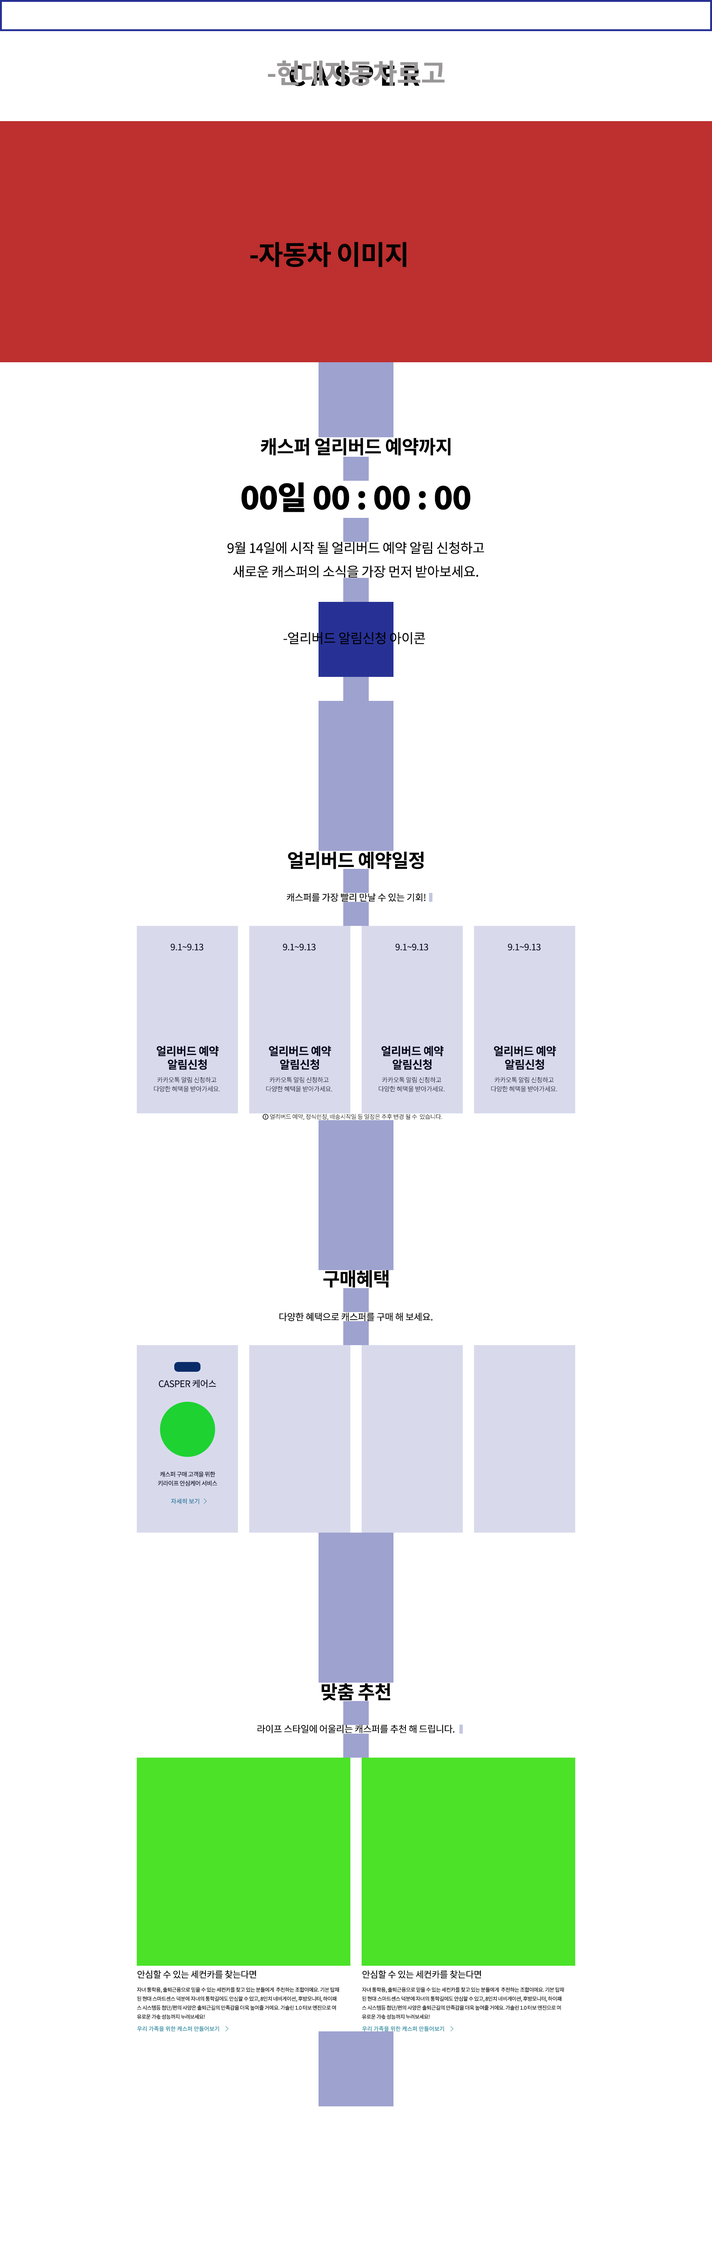
<style>
.page{position:relative;width:712px;height:2250px;background:#ffffff}
.page>*{position:absolute;margin:0}
.t1{font:27px "NotoSansKR-Bold";letter-spacing:0.2em}
.t2{font:27px "NotoSansKR-Bold";letter-spacing:-0.025em;color:#010101}
.t3{font:18.7px "NotoSansKR-Bold";letter-spacing:-0.025em;color:#000000}
.t4{font:31.9px "NotoSansKR-Black";letter-spacing:-0.025em;color:#000000}
.t5{font:13.5px "NotoSansKR-Regular";letter-spacing:-0.025em;color:#000000}
.t6{font:9.4px "NotoSansKR-Regular";letter-spacing:-0.025em;color:#000000}
.t7{font:9px "NotoSansKR-Regular";letter-spacing:-0.025em;color:#07091b}
.t8{font:11.2px/13.5px "NotoSansKR-Bold";letter-spacing:-0.025em;color:#07091b}
.t9{font:6.4px/9px "NotoSansKR-Light";letter-spacing:-0.025em;color:#07091b}
.t10{font:6px "NotoSansKR-Light";letter-spacing:-0.025em;color:#000000}
.t11{font:6px/9px "NotoSansKR-Regular";letter-spacing:-0.05em;color:#07091b}
.t12{font:6px "NotoSansKR-Regular";color:#1f879d}
.t13{font:9px "NotoSansKR-Regular";letter-spacing:-0.025em;color:#000000}
.t14{font:5.2px/9px "NotoSansKR-Regular";letter-spacing:-0.05em;color:#000000}
.t15{font:5.6px "NotoSansKR-Regular";color:#1f879d}
</style>
<div class="page">
<p class="t1" style="left:289px;top:65px;width:131px;height:21px">CASPER</p>
<p class="t2" style="left:250px;top:242px;width:157px;height:25px">-자동차 이미지</p>
<p class="t3" style="left:261px;top:438px;width:190px;height:18px">캐스퍼 얼리버드 예약까지</p>
<p class="t4" style="left:241px;top:482px;width:230px;height:30px">00일 00 : 00 : 00</p>
<p class="t5" style="left:228px;top:541px;width:256px;height:37px;text-align:center">9월 14일에 시작 될 얼리버드 예약 알림 신청하고<br>새로운 캐스퍼의 소식을 가장 먼저 받아보세요.</p>
<p class="t5" style="left:283px;top:632px;width:143px;height:13px">-얼리버드 알림신청 아이콘</p>
<p class="t3" style="left:288px;top:852px;width:136px;height:17px">얼리버드 예약일정</p>
<p class="t6" style="left:287px;top:893px;width:139px;height:9px">캐스퍼를 가장 빨리 만날 수 있는 기회!</p>
<p class="t7" style="left:171px;top:943px;width:33px;height:8px">9.1~9.13</p>
<p class="t7" style="left:283px;top:943px;width:33px;height:8px">9.1~9.13</p>
<p class="t7" style="left:396px;top:943px;width:33px;height:8px">9.1~9.13</p>
<p class="t7" style="left:508px;top:943px;width:33px;height:8px">9.1~9.13</p>
<p class="t8" style="left:157px;top:1046px;width:62px;height:24px;text-align:center">얼리버드 예약<br>알림신청</p>
<p class="t8" style="left:269px;top:1046px;width:62px;height:24px;text-align:center">얼리버드 예약<br>알림신청</p>
<p class="t8" style="left:382px;top:1046px;width:62px;height:24px;text-align:center">얼리버드 예약<br>알림신청</p>
<p class="t8" style="left:494px;top:1046px;width:62px;height:24px;text-align:center">얼리버드 예약<br>알림신청</p>
<p class="t9" style="left:154px;top:1077px;width:66px;height:15px;text-align:center">카카오톡 알림 신청하고<br>다양한 혜택을 받아가세요.</p>
<p class="t9" style="left:266px;top:1077px;width:67px;height:15px;text-align:center">카카오톡 알림 신청하고<br>다양한 혜택을 받아가세요.</p>
<p class="t9" style="left:379px;top:1077px;width:66px;height:15px;text-align:center">카카오톡 알림 신청하고<br>다양한 혜택을 받아가세요.</p>
<p class="t9" style="left:492px;top:1077px;width:66px;height:15px;text-align:center">카카오톡 알림 신청하고<br>다양한 혜택을 받아가세요.</p>
<p class="t10" style="left:270px;top:1114px;width:172px;height:6px">얼리버드 예약, 정식런칭, 배송시작일 등 일정은 추후 변경 될 수  있습니다.</p>
<p class="t3" style="left:324px;top:1270px;width:65px;height:18px">구매혜택</p>
<p class="t6" style="left:279px;top:1312px;width:154px;height:9px">다양한 혜택으로 캐스퍼를 구매 해 보세요.</p>
<p class="t7" style="left:159px;top:1380px;width:57px;height:8px">CASPER 케어스</p>
<p class="t11" style="left:158px;top:1471px;width:59px;height:15px;text-align:center">캐스퍼 구매 고객을 위한<br>키라이프 안심케어 서비스</p>
<p class="t12" style="left:171px;top:1498px;width:28px;height:6px">자세히 보기</p>
<p class="t3" style="left:322px;top:1683px;width:69px;height:18px">맞춤 추천</p>
<p class="t6" style="left:258px;top:1725px;width:197px;height:8px">라이프 스타일에 어울리는 캐스퍼를 추천 해 드립니다.</p>
<p class="t13" style="left:138px;top:1970px;width:118px;height:8px">안심할 수 있는 세컨카를 찾는다면</p>
<p class="t13" style="left:363px;top:1970px;width:118px;height:8px">안심할 수 있는 세컨카를 찾는다면</p>
<p class="t14" style="left:137px;top:1987px;width:202px;height:32px">자녀 통학용, 출퇴근용으로 믿을 수 있는 세컨카를 찾고 있는 분들에게  추천하는 조합이에요. 기본 탑재<br>된 현대 스마트센스 덕분에 자녀의 통학길에도 안심할 수 있고, 8인치 네비게이션, 후방모니터, 하이패<br>스 시스템등 첨단/편의 사양은 출퇴근길의 만족감을 더욱 높여줄 거에요. 가솔린 1.0 터보 엔진으로 여<br>유로운 가솏 성능까지 누려보세요!</p>
<p class="t14" style="left:362px;top:1987px;width:202px;height:32px">자녀 통학용, 출퇴근용으로 믿을 수 있는 세컨카를 찾고 있는 분들에게  추천하는 조합이에요. 기본 탑재<br>된 현대 스마트센스 덕분에 자녀의 통학길에도 안심할 수 있고, 8인치 네비게이션, 후방모니터, 하이패<br>스 시스템등 첨단/편의 사양은 출퇴근길의 만족감을 더욱 높여줄 거에요. 가솔린 1.0 터보 엔진으로 여<br>유로운 가솏 성능까지 누려보세요!</p>
<p class="t15" style="left:137px;top:2026px;width:82px;height:5px">우리 가족을 위한 캐스퍼 만들어보기</p>
<p class="t15" style="left:362px;top:2026px;width:82px;height:5px">우리 가족을 위한 캐스퍼 만들어보기</p>
</div>
